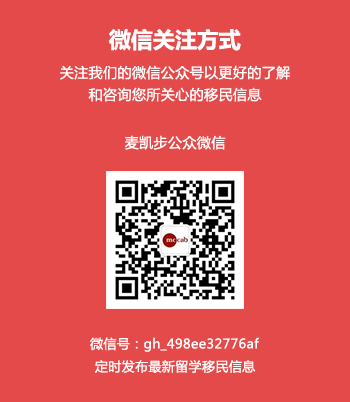
<style>
.page{position:relative;width:350px;height:402px;background:#e44a4a}
.page>*{position:absolute;margin:0}
.t1{font:22px "MicrosoftYaHei-Bold";color:#ffffff;text-transform:uppercase}
.t2{font:14px/22px "MicrosoftYaHei";letter-spacing:0.03em;color:#ffffff;text-transform:uppercase}
.t3{font:14px "MicrosoftYaHei";letter-spacing:0.03em;color:#ffffff;text-transform:uppercase}
.t4{font:13px "MicrosoftYaHei";letter-spacing:0.03em;color:#ffffff}
.t5{font:13px "MicrosoftYaHei";letter-spacing:0.03em;color:#ffffff;text-transform:uppercase}
</style>
<div class="page">
<p class="t1" style="left:108px;top:28px;width:133px;height:23px">微信关注方式</p>
<p class="t2" style="left:60px;top:65px;width:230px;height:37px;text-align:center">关注我们的微信公众号以更好的了解<br>和咨询您所关心的移民信息</p>
<p class="t3" style="left:125px;top:135px;width:101px;height:15px">麦凯步公众微信</p>
<p class="t4" style="left:90px;top:337px;width:169px;height:15px"><span class="t5">微信号：</span>gh_498ee32776af</p>
<p class="t4" style="left:95px;top:360px;width:161px;height:13px">定时发布最新留学移民信息</p>
</div>
